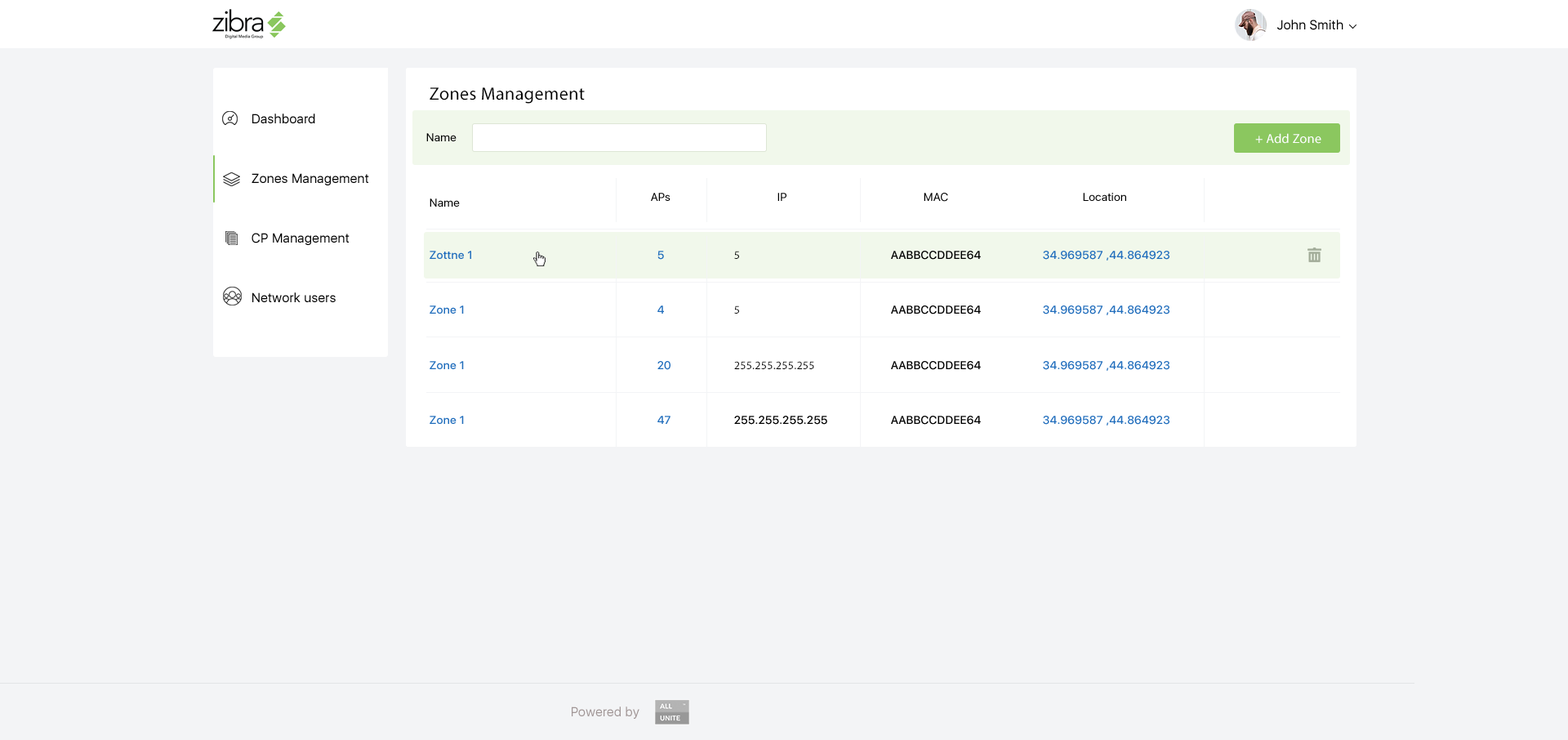
<style>
.page{position:relative;width:1568px;height:740px;background:#f3f4f6}
.page>*{position:absolute;margin:0}
.t1{font:13.1px "SFUIDisplay-Regular";letter-spacing:0.02em;color:#000000}
.t2{font:18px "MyriadPro-Regular";letter-spacing:0.02em;color:#000000}
.t3{font:13.1px/59.6px "SFUIDisplay-Regular";letter-spacing:0.02em;color:#000000}
.t4{font:11.4px "SFUIDisplay-Regular";letter-spacing:0.02em;color:#000000}
.t5{font:13.1px "MyriadPro-Regular";letter-spacing:0.02em;color:#ffffff}
.t6{font:11.4px "SFUIDisplay-Medium";letter-spacing:0.02em;color:#206dbc}
.t7{font:11.4px "MyriadPro-Regular";letter-spacing:0.02em;color:#000000}
.t8{font:11.4px "SFUIDisplay-Medium";letter-spacing:0.02em;color:#000000}
.t9{font:13.1px "SFUIDisplay-Regular";letter-spacing:0.02em;color:#a19696}
</style>
<div class="page">
<p class="t1" style="left:1277px;top:20px;width:66px;height:10px">John Smith</p>
<p class="t2" style="left:430px;top:87px;width:155px;height:17px">Zones Management</p>
<p class="t3" style="left:252px;top:114px;width:117px;height:188px;text-align:right">Dashboard<br>Zones Management<br>CP Management<br>Network users</p>
<p class="t4" style="left:426px;top:133px;width:31px;height:8px">Name</p>
<p class="t5" style="left:1255px;top:133px;width:66px;height:11px">Add Zone +</p>
<p class="t4" style="left:651px;top:193px;width:19px;height:8px">APs</p>
<p class="t4" style="left:777px;top:193px;width:9px;height:8px">IP</p>
<p class="t4" style="left:924px;top:193px;width:24px;height:9px">MAC</p>
<p class="t4" style="left:1083px;top:193px;width:43px;height:8px">Location</p>
<p class="t4" style="left:430px;top:198px;width:30px;height:9px">Name</p>
<p class="t6" style="left:430px;top:251px;width:41px;height:8px">Zottne 1</p>
<p class="t6" style="left:657px;top:251px;width:7px;height:9px">5</p>
<p class="t7" style="left:734px;top:251px;width:5px;height:8px">5</p>
<p class="t8" style="left:891px;top:251px;width:90px;height:9px">AABBCCDDEE64</p>
<p class="t6" style="left:1043px;top:251px;width:126px;height:10px">44.864923, 34.969587</p>
<p class="t6" style="left:430px;top:305px;width:34px;height:9px">Zone 1</p>
<p class="t6" style="left:657px;top:305px;width:7px;height:9px">4</p>
<p class="t7" style="left:734px;top:305px;width:5px;height:9px">5</p>
<p class="t8" style="left:891px;top:305px;width:90px;height:9px">AABBCCDDEE64</p>
<p class="t6" style="left:1043px;top:305px;width:126px;height:10px">44.864923, 34.969587</p>
<p class="t6" style="left:430px;top:361px;width:34px;height:8px">Zone 1</p>
<p class="t6" style="left:657px;top:361px;width:13px;height:9px">20</p>
<p class="t7" style="left:734px;top:361px;width:80px;height:8px">255.255.255.255</p>
<p class="t8" style="left:891px;top:361px;width:90px;height:9px">AABBCCDDEE64</p>
<p class="t6" style="left:1043px;top:361px;width:126px;height:10px">44.864923, 34.969587</p>
<p class="t6" style="left:430px;top:416px;width:34px;height:8px">Zone 1</p>
<p class="t6" style="left:657px;top:416px;width:13px;height:8px">47</p>
<p class="t8" style="left:734px;top:416px;width:93px;height:9px">255.255.255.255</p>
<p class="t8" style="left:891px;top:416px;width:90px;height:9px">AABBCCDDEE64</p>
<p class="t6" style="left:1043px;top:416px;width:126px;height:9px">44.864923, 34.969587</p>
<p class="t9" style="left:572px;top:706px;width:67px;height:13px">Powered by</p>
</div>
